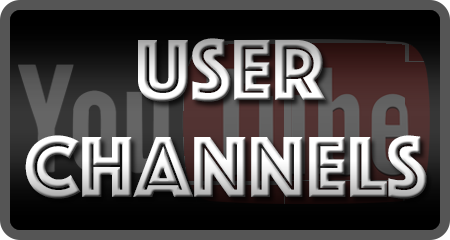
<style>
.page{position:relative;width:450px;height:240px}
.page>*{position:absolute;margin:0}
.t1{font:90px "Phosphate-Inline"}
</style>
<div class="page">
<p class="t1" style="left:138px;top:38px;width:188px;height:64px">User</p>
<p class="t1" style="left:25px;top:135px;width:402px;height:64px">Channels</p>
</div>
